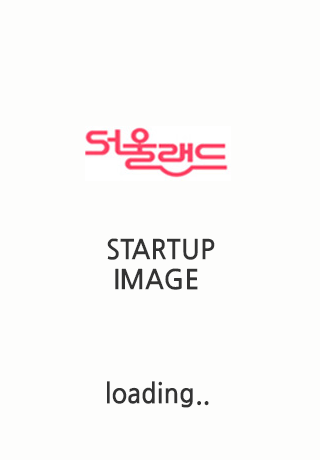
<style>
.page{position:relative;width:320px;height:460px;background:#fdfdfc}
.page>*{position:absolute;margin:0}
.t1{font:27.3px/30px "NanumGothicBold";color:#333333;scale:0.95 1}
.t2{font:27.3px "NanumGothicBold";color:#333333;scale:0.95 1}
</style>
<div class="page">
<p class="t1" style="left:107px;top:238px;width:108px;height:52px">STARTUP<br> IMAGE</p>
<p class="t2" style="left:107px;top:381px;width:102px;height:27px">loading..</p>
</div>
